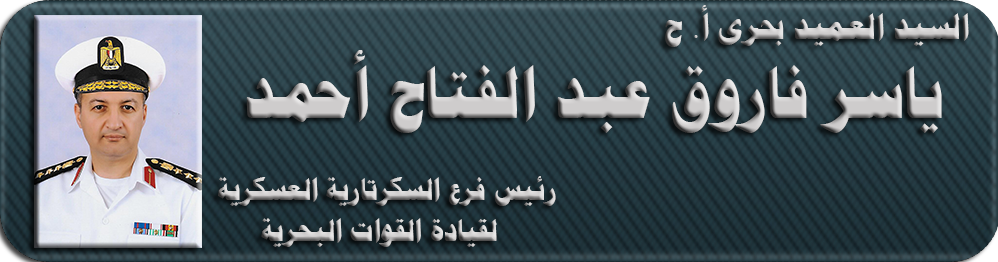
<style>
.page{position:relative;width:998px;height:262px}
.page>*{position:absolute;margin:0}
.t1{font:30px/41px "PTBoldHeading"}
.t2{font:35px/79px "PTBoldHeading"}
.t3{font:70px/79px "PTBoldHeading"}
</style>
<div class="page">
<p class="t1" style="left:218px;top:5px;width:751px;height:242px;text-align:right"><span class="t2">السيد العميد بحرى أ. ح<br></span><span class="t3">ياسر فاروق عبد الفتاح أحمد<br></span><br>رئيس فرع السكرتارية العسكرية<br>  لقيادة القوات البحرية</p>
</div>
